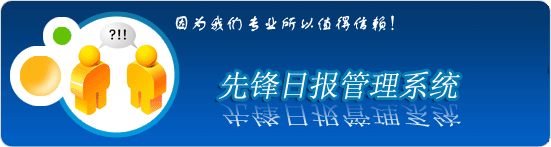
<style>
.page{position:relative;width:551px;height:147px}
.page>*{position:absolute;margin:0}
.t1{font:18px "FZSTK--GBK1-0";color:#ffffff}
.t2{font:30px "NSimSun";color:#ffffff;font-style:italic}
.t3{font:25.5px "NSimSun";font-style:italic;scale:1.18 1}
</style>
<div class="page">
<p class="t1" style="left:175px;top:15px;width:219px;height:17px">因为我们专业所以值得信赖！</p>
<p class="t2" style="left:218px;top:71px;width:242px;height:29px">先锋日报管理系统</p>
<p class="t3" style="left:219px;top:103px;width:242px;height:24px">先锋日报管理系统</p>
</div>
